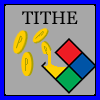
<style>
.page{position:relative;width:100px;height:100px;background:#a7a7a7}
.page>*{position:absolute;margin:0}
.t1{font:18px "Georgia";color:#000000}
</style>
<div class="page">
<p class="t1" style="left:22px;top:11px;width:56px;height:13px">TITHE</p>
</div>
